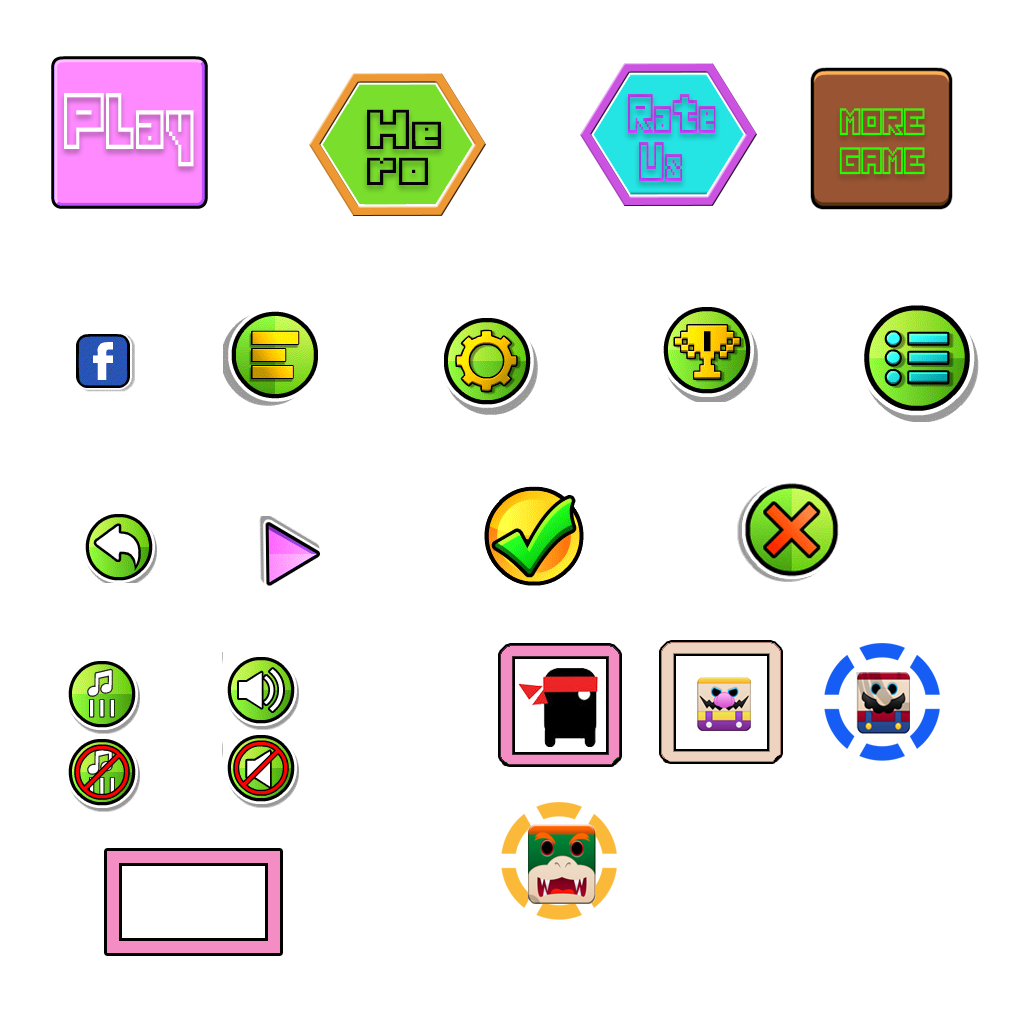
<style>
.page{position:relative;width:1024px;height:1024px;background:#ffffff}
.page>*{position:absolute;margin:0}
.t1{font:69.1px "Thirteen-Pixel-Fonts";letter-spacing:-0.02em;color:#ffffff;scale:0.71 1}
.t2{font:47.9px/48px "Thirteen-Pixel-Fonts";letter-spacing:-0.02em;color:#b03ce1;scale:0.63 1}
.t3{font:48.4px/36px "Thirteen-Pixel-Fonts";letter-spacing:-0.02em;color:#060206;scale:1.07 1}
.t4{font:32.7px "Thirteen-Pixel-Fonts";letter-spacing:-0.02em;color:#23ff01;scale:0.76 1}
</style>
<div class="page">
<p class="t1" style="left:64px;top:93px;width:130px;height:74px">Play</p>
<p class="t2" style="left:627px;top:93px;width:89px;height:89px">Rate<br> Us</p>
<p class="t3" style="left:367px;top:109px;width:74px;height:76px">He<br>ro</p>
<p class="t4" style="left:839px;top:108px;width:86px;height:67px">MORE<br>GAME</p>
</div>
